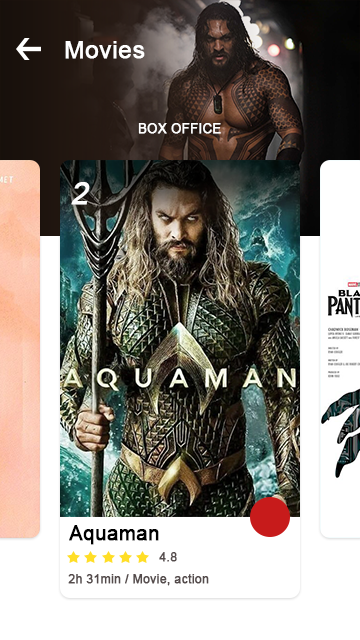
<style>
.page{position:relative;width:360px;height:640px;background:#ffffff}
.page>*{position:absolute;margin:0}
.t1{font:24px "ArialMT";letter-spacing:0.01em;color:#ffffff;font-weight:bold}
.t2{font:13px "ArialMT";letter-spacing:0.01em;color:#ffffff;font-weight:bold}
.t3{font:30px "ArialMT";letter-spacing:0.01em;color:#fcfcfc;font-weight:bold;font-style:italic}
.t4{font:20px "ArialMT";letter-spacing:0.01em;color:#000000;font-weight:bold}
.t5{font:12px "ArialMT";letter-spacing:0.01em;color:#554c4c;font-weight:bold}
</style>
<div class="page">
<p class="t1" style="left:65px;top:41px;width:80px;height:18px">Movies</p>
<p class="t2" style="left:138px;top:123px;width:83px;height:11px">BOX OFFICE</p>
<p class="t3" style="left:71px;top:182px;width:19px;height:23px">2</p>
<p class="t4" style="left:69px;top:525px;width:90px;height:20px">Aquaman</p>
<p class="t5" style="left:159px;top:552px;width:18px;height:10px">4.8</p>
<p class="t5" style="left:68px;top:574px;width:141px;height:12px">2h 31min / Movie, action</p>
</div>
